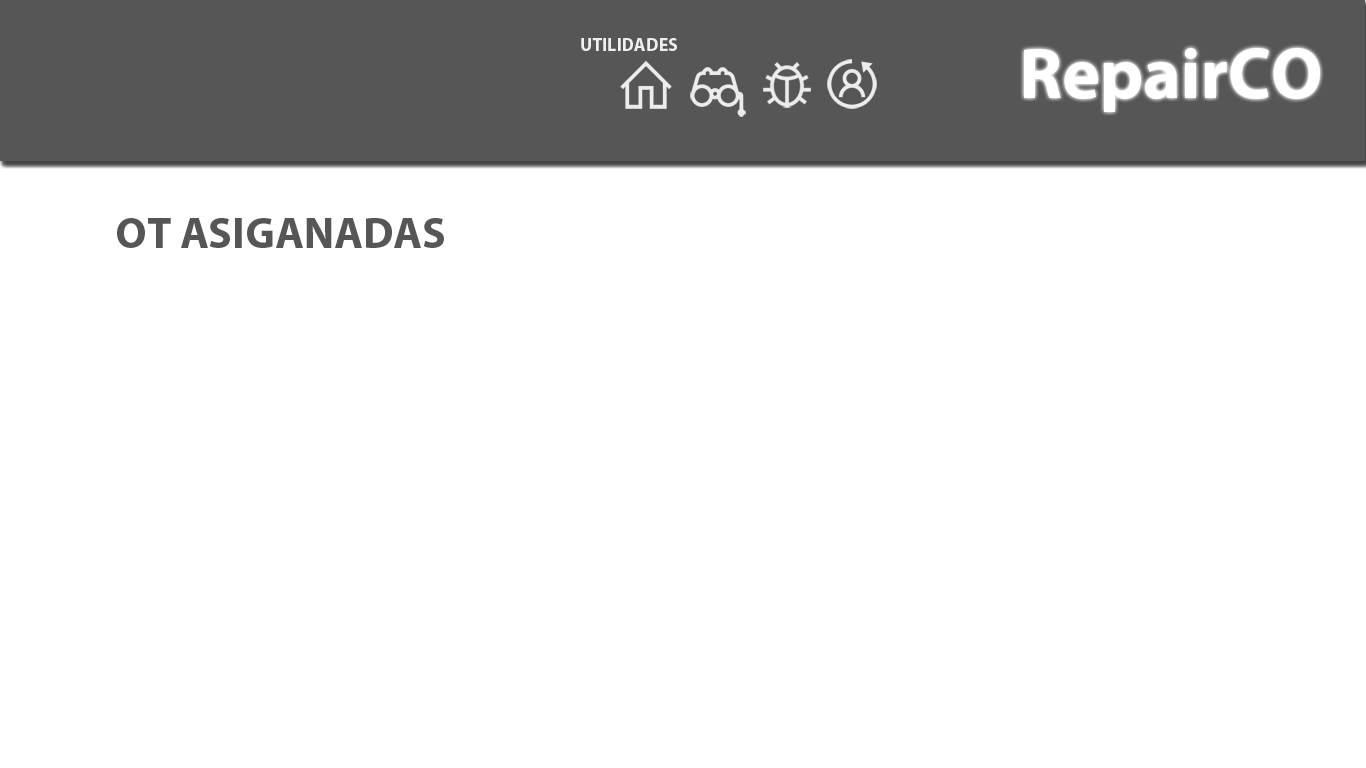
<style>
.page{position:relative;width:1366px;height:768px;background:#ffffff}
.page>*{position:absolute;margin:0}
.t1{font:18px "MyriadPro-Bold";color:#efefef}
.t2{font:72px "MyriadPro-Bold";color:#c7c4c4}
.t3{font:72px "MyriadPro-Bold";color:#fffdfd}
.t4{font:44px "MyriadPro-Bold";color:#565656}
</style>
<div class="page">
<p class="t1" style="left:581px;top:38px;width:96px;height:13px">UTILIDADES</p>
<p class="t2" style="left:1024px;top:48px;width:296px;height:64px">Repair<span class="t3">CO</span></p>
<p class="t4" style="left:117px;top:218px;width:327px;height:30px">OT ASIGANADAS</p>
</div>
